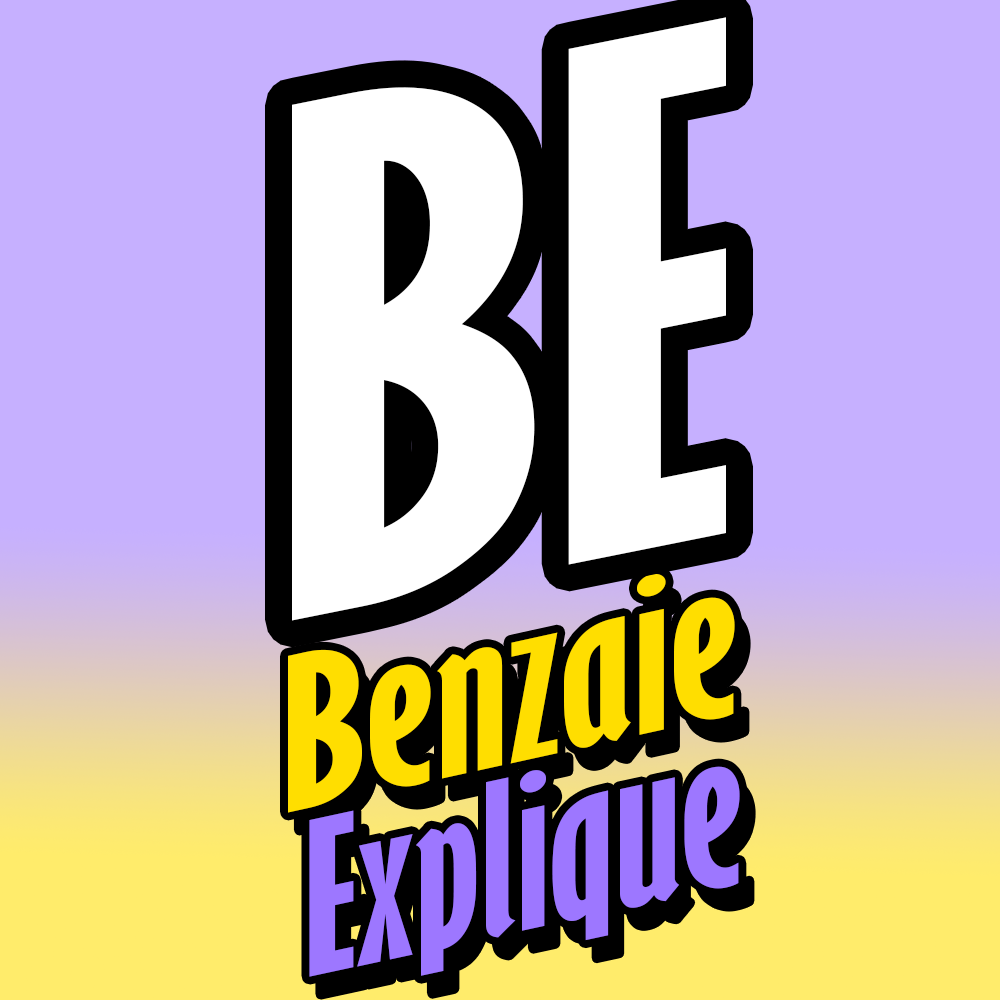
<style>
.page{position:relative;width:1000px;height:1000px;background:#c6b0ff}
.page>*{position:absolute;margin:0}
.t1{font:647.6px "GillSansMT-ExtraCondensedBold";color:#ffffff;scale:1.35 1}
.t2{font:196.6px "GillSansMT-ExtraCondensedBold";color:#ffde00;scale:1.37 1}
.t3{font:196.5px "GillSansMT-ExtraCondensedBold";color:#9d77ff;scale:1.24 1}
</style>
<div class="page">
<p class="t1" style="left:292px;top:17px;width:434px;height:604px;rotate:-11deg">BE</p>
<p class="t2" style="left:288px;top:573px;width:447px;height:240px;rotate:-12deg">Benzaie</p>
<p class="t3" style="left:309px;top:766px;width:431px;height:211px;rotate:-12deg">Explique</p>
</div>
